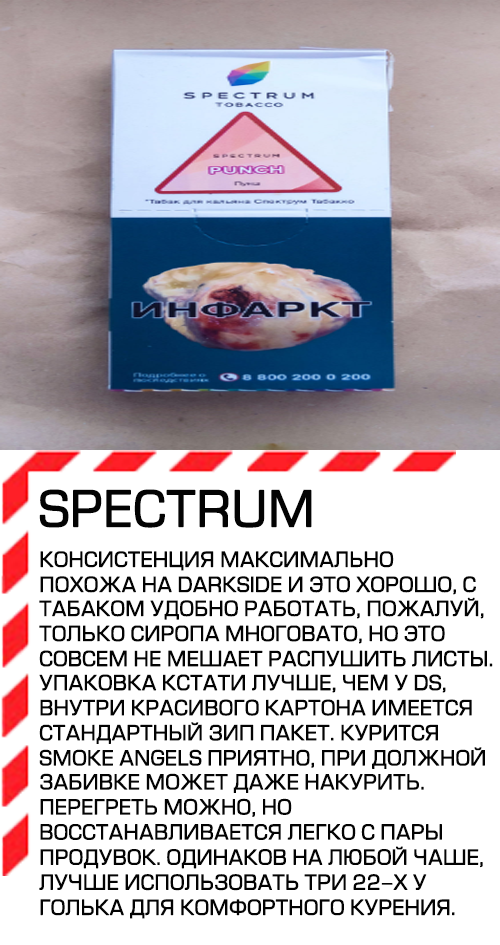
<style>
.page{position:relative;width:500px;height:945px;background:#ffffff}
.page>*{position:absolute;margin:0}
.t1{font:48px "EuropeNormal";color:#030303;text-transform:uppercase;font-weight:bold}
.t2{font:20px "EuropeNormal";color:#030303;text-transform:uppercase;font-weight:bold}
</style>
<div class="page">
<p class="t1" style="left:39px;top:489px;width:273px;height:39px">spectrum</p>
<p class="t2" style="left:39px;top:551px;width:454px;height:368px">Консистенция максимально <br>похожа на DarkSide и это хорошо, с табаком удобно работать, пожалуй, <br>только сиропа многовато, но это <br>совсем не мешает распушить листы. Упаковка кстати лучше, чем у DS, <br>внутри красивого картона имеется <br>стандартный зип пакет. Курится <br>Smoke Angels приятно, при должной забивке может даже накурить. <br>Перегреть можно, но <br>восстанавливается легко с пары <br>продувок. Одинаков на любой чаше, <br>лучше использовать три 22-х у<br>голька для комфортного курения.</p>
</div>
